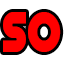
<style>
.page{position:relative;width:64px;height:64px;background:#ffffff}
.page>*{position:absolute;margin:0}
.t1{font:58.3px "LeanForeword";color:#ff0000;scale:0.8 1}
</style>
<div class="page">
<p class="t1" style="left:3px;top:12px;width:58px;height:40px">SO</p>
</div>
